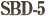
<style>
.page{position:relative;width:54px;height:16px;background:#ffffff}
.page>*{position:absolute;margin:0}
.t1{font:18px "RyuminPro-ExBold";letter-spacing:-0.06em;color:#4a3f32;font-weight:bold;scale:0.9 1}
</style>
<div class="page">
<p class="t1" style="left:0px;top:1px;width:45px;height:15px">SBD-5</p>
</div>
